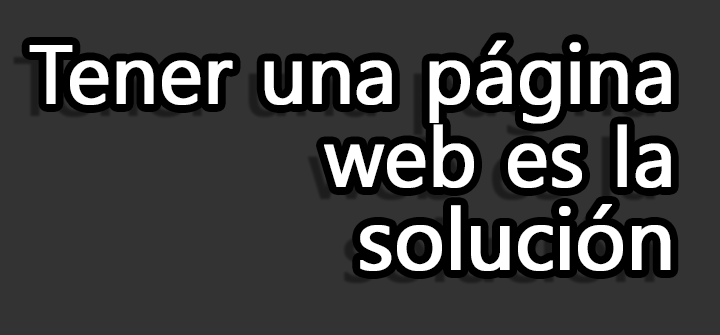
<style>
.page{position:relative;width:720px;height:335px;background:#333333}
.page>*{position:absolute;margin:0}
.t1{font:82.9px/82.9px "Gadugi";letter-spacing:0.005em;color:#ffffff;font-weight:bold}
.t2{font:86px/82.9px "Gadugi";letter-spacing:0.005em;color:#ffffff;font-weight:bold}
</style>
<div class="page">
<p class="t1" style="left:29px;top:40px;width:642px;height:231px;text-align:right">Tener una página<br>web es la<br><span class="t2">solución</span></p>
</div>
